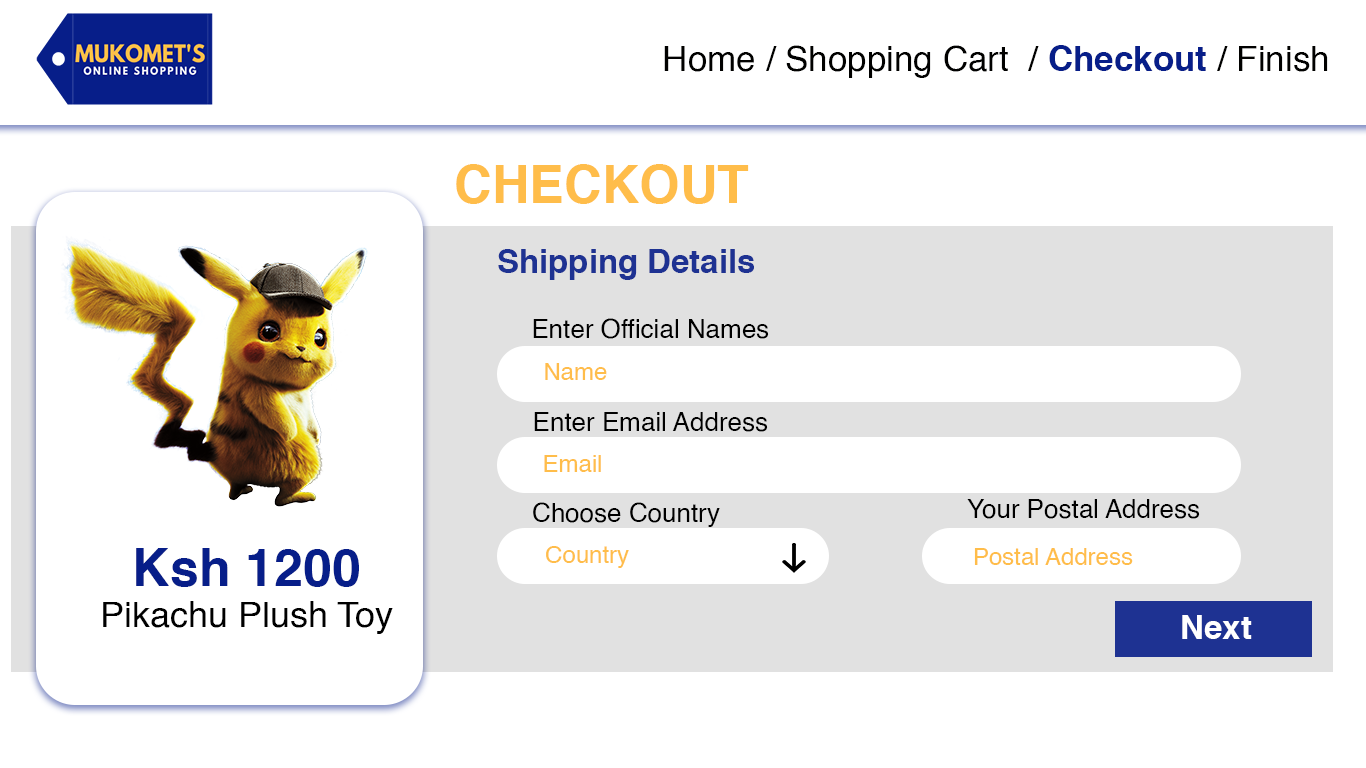
<style>
.page{position:relative;width:1366px;height:768px;background:#ffffff}
.page>*{position:absolute;margin:0}
.t1{font:35px "Helvetica";color:#010100}
.t2{font:35px "Helvetica-Bold";color:#071e89}
.t3{font:52px "Helvetica-Bold";color:#ffbd4a}
.t4{font:33px "Helvetica-Bold";color:#1e3292}
.t5{font:26px "Helvetica";color:#000000}
.t6{font:24px "Helvetica";color:#ffbd4a}
.t7{font:52px "Helvetica-Bold";color:#071e89}
.t8{font:36px "Helvetica";color:#000000}
.t9{font:33px "Helvetica-Bold";color:#ffffff}
</style>
<div class="page">
<p class="t1" style="left:664px;top:45px;width:664px;height:33px">Home / Shopping Cart  / <span class="t2">Checkout </span>/ Finish</p>
<p class="t3" style="left:456px;top:164px;width:293px;height:40px">CHECKOUT</p>
<p class="t4" style="left:498px;top:249px;width:256px;height:31px">Shipping Details</p>
<p class="t5" style="left:533px;top:318px;width:236px;height:21px">Enter Official Names</p>
<p class="t6" style="left:545px;top:363px;width:62px;height:17px">Name</p>
<p class="t5" style="left:534px;top:412px;width:234px;height:20px">Enter Email Address</p>
<p class="t6" style="left:544px;top:455px;width:57px;height:17px">Email</p>
<p class="t5" style="left:533px;top:502px;width:187px;height:25px">Choose Country</p>
<p class="t5" style="left:967px;top:499px;width:233px;height:20px">Your Postal Address</p>
<p class="t7" style="left:136px;top:548px;width:223px;height:39px">Ksh 1200</p>
<p class="t6" style="left:546px;top:546px;width:83px;height:22px">Country</p>
<p class="t6" style="left:974px;top:548px;width:159px;height:17px">Postal Address</p>
<p class="t8" style="left:103px;top:601px;width:290px;height:33px">Pikachu Plush Toy</p>
<p class="t9" style="left:1182px;top:615px;width:70px;height:24px">Next</p>
</div>
